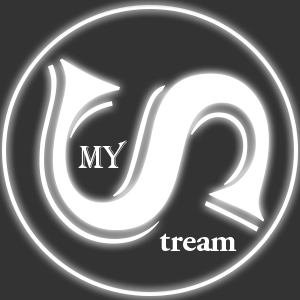
<style>
.page{position:relative;width:300px;height:300px;background:#333333}
.page>*{position:absolute;margin:0}
.t1{font:333.3px "Algerian";color:#ffffff}
.t2{font:33.3px "Algerian";color:#ffffff}
.t3{font:33.3px "AGaramondPro-Bold";color:#ffffff}
</style>
<div class="page">
<p class="t1" style="left:39px;top:58px;width:230px;height:186px;rotate:90deg">s</p>
<p class="t2" style="left:78px;top:140px;width:49px;height:28px">MY</p>
<p class="t3" style="left:159px;top:233px;width:78px;height:18px">tream</p>
</div>
